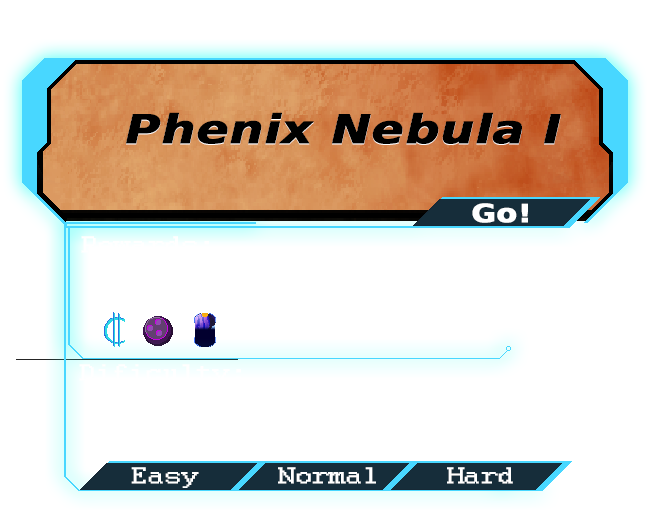
<style>
.page{position:relative;width:665px;height:531px;background:#ffffff}
.page>*{position:absolute;margin:0}
.t1{font:39.7px "DejaVuSans-BoldOblique";color:#000000;font-weight:bold;scale:1.19 1}
.t2{font:25px "DejaVuSans-Bold";color:#ffffff;font-weight:bold;scale:1.19 1}
.t3{font:25px "Courier";color:#ffffff;font-weight:bold;scale:1.19 1}
</style>
<div class="page">
<p class="t1" style="left:126px;top:113px;width:435px;height:32px">Phenix Nebula I</p>
<p class="t1" style="left:126px;top:112px;width:435px;height:32px">Phenix Nebula I</p>
<p class="t2" style="left:472px;top:203px;width:56px;height:20px">Go!</p>
<p class="t3" style="left:81px;top:236px;width:128px;height:17px">Rewards:</p>
<p class="t3" style="left:79px;top:364px;width:162px;height:21px">Dificulty:</p>
<p class="t3" style="left:131px;top:467px;width:68px;height:21px">Easy</p>
<p class="t3" style="left:278px;top:467px;width:98px;height:17px">Normal</p>
<p class="t3" style="left:447px;top:467px;width:66px;height:17px">Hard</p>
</div>
